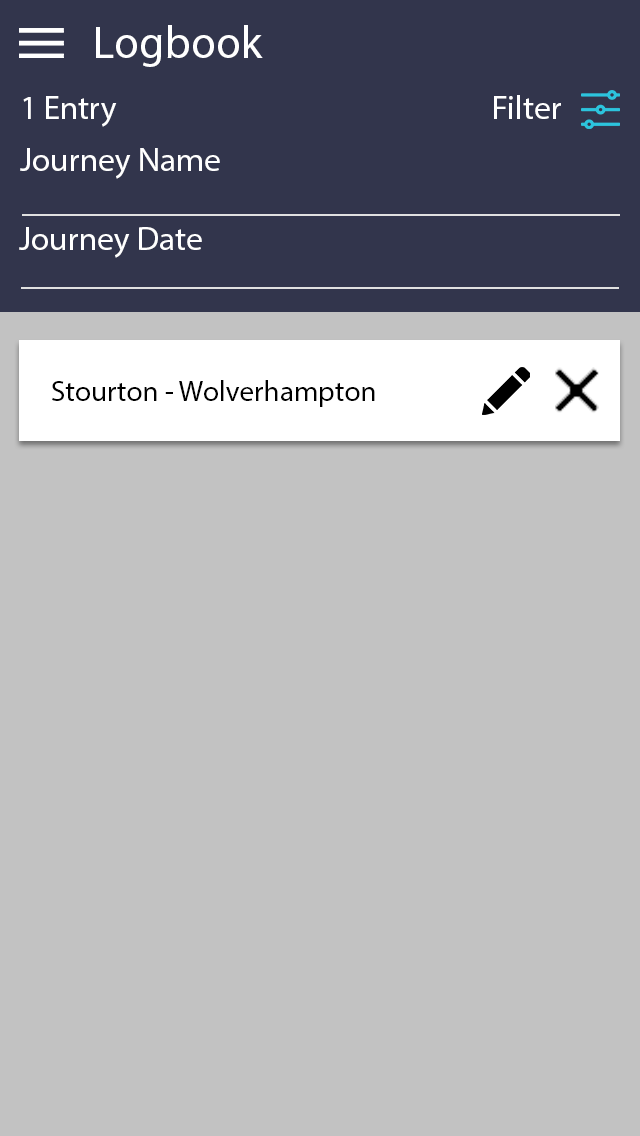
<style>
.page{position:relative;width:640px;height:1136px;background:#c2c2c2}
.page>*{position:absolute;margin:0}
.t1{font:45.8px "MyriadPro-Regular";color:#ffffff}
.t2{font:33.3px "MyriadPro-Regular";color:#ffffff}
.t3{font:29.2px "MyriadPro-Regular";color:#000000}
</style>
<div class="page">
<p class="t1" style="left:96px;top:25px;width:167px;height:42px">Logbook</p>
<p class="t2" style="left:23px;top:96px;width:94px;height:31px">1 Entry</p>
<p class="t2" style="left:494px;top:95px;width:67px;height:24px">Filter</p>
<p class="t2" style="left:20px;top:148px;width:200px;height:31px">Journey Name</p>
<p class="t2" style="left:19px;top:227px;width:183px;height:31px">Journey Date</p>
<p class="t3" style="left:52px;top:380px;width:323px;height:27px">Stourton - Wolverhampton</p>
</div>
